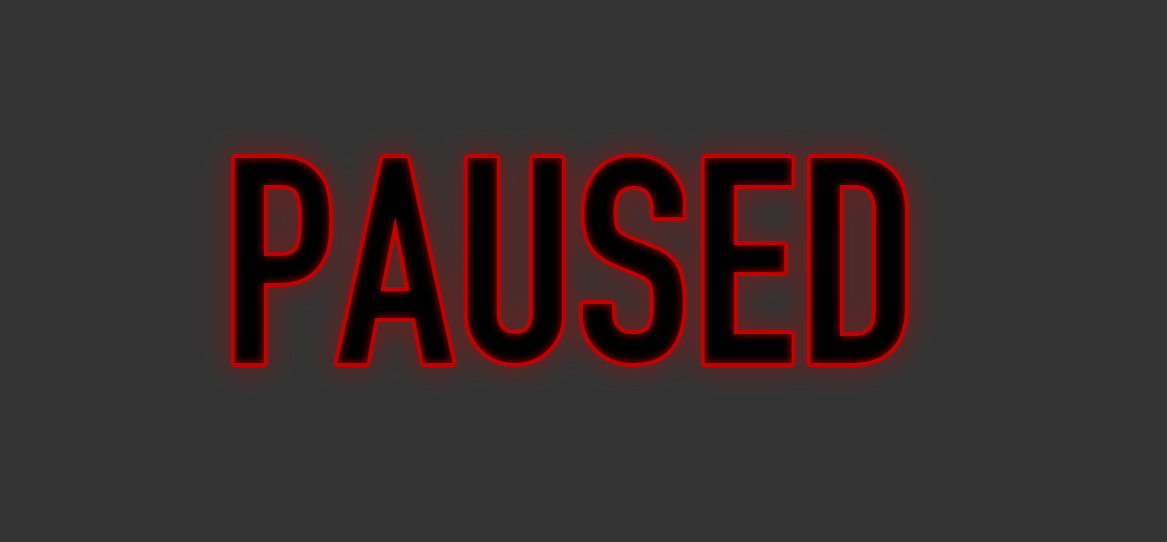
<style>
.page{position:relative;width:1167px;height:542px;background:#333333}
.page>*{position:absolute;margin:0}
.t1{font:285.8px "DINEngschrift";color:#060000}
</style>
<div class="page">
<p class="t1" style="left:234px;top:157px;width:671px;height:207px">PAUSED</p>
</div>
